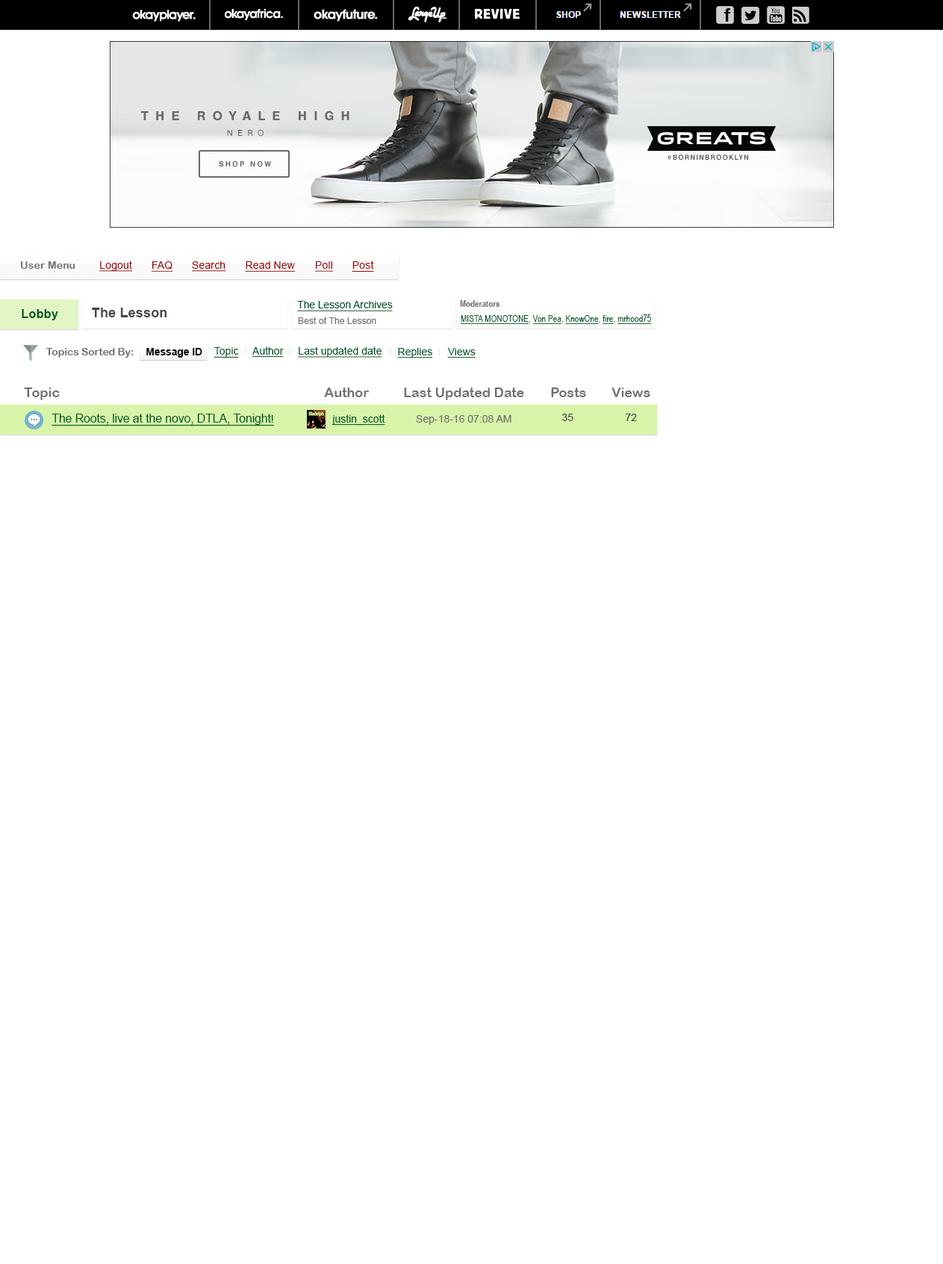
<style>
.page{position:relative;width:943px;height:1264px;background:#ffffff}
.page>*{position:absolute;margin:0}
.t1{font:10.5px "ArialRoundedMTBold";letter-spacing:0.01em;color:#707070}
.t2{font:10.5px "ArialMT";letter-spacing:0.01em;color:#9e0b0f;text-decoration:underline}
.t3{font:10.5px "ArialMT";letter-spacing:-0.01em;color:#005826;text-decoration:underline}
.t4{font:9px "ArialNarrow-Bold";color:#707070}
.t5{font:11.9px "Arial-BoldMT";letter-spacing:0.025em;color:#005826}
.t6{font:13.4px "Arial-BoldMT";letter-spacing:0.01em;color:#464646}
.t7{font:9px "ArialMT";letter-spacing:0.01em;color:#707070}
.t8{font:9px "ArialNarrow";letter-spacing:0.01em;color:#005826;text-decoration:underline}
.t9{font:9px "ArialNarrow";letter-spacing:0.01em;color:#005826}
.t10{font:10.5px "ArialRoundedMTBold";letter-spacing:-0.01em;color:#707070}
.t11{font:10.5px "Arial-BoldMT";letter-spacing:-0.01em;color:#000000}
.t12{font:10.5px "ArialMT";color:#005826;text-decoration:underline}
.t13{font:13.4px "ArialRoundedMTBold";color:#707070}
.t14{font:11.9px "ArialMT";letter-spacing:-0.01em;color:#005826;text-decoration:underline}
.t15{font:10.5px "ArialMT";color:#464646}
.t16{font:10.5px "ArialMT";color:#707070}
</style>
<div class="page">
<p class="t1" style="left:21px;top:261px;width:54px;height:8px">User Menu</p>
<p class="t2" style="left:99px;top:261px;width:34px;height:11px">Logout</p>
<p class="t2" style="left:151px;top:261px;width:22px;height:11px">FAQ</p>
<p class="t2" style="left:192px;top:261px;width:34px;height:11px">Search</p>
<p class="t2" style="left:245px;top:261px;width:51px;height:11px">Read New</p>
<p class="t2" style="left:315px;top:261px;width:18px;height:11px">Poll</p>
<p class="t2" style="left:352px;top:261px;width:22px;height:11px">Post</p>
<p class="t3" style="left:297px;top:301px;width:96px;height:10px">The Lesson Archives</p>
<p class="t4" style="left:460px;top:300px;width:40px;height:7px">Moderators</p>
<p class="t5" style="left:22px;top:309px;width:36px;height:11px">Lobby</p>
<p class="t6" style="left:92px;top:308px;width:75px;height:9px">The Lesson</p>
<p class="t7" style="left:298px;top:317px;width:78px;height:7px">Best of The Lesson</p>
<p class="t8" style="left:461px;top:314px;width:191px;height:10px">MISTA MONOTONE<span class="t9">, </span>Von Pea<span class="t9">, </span>KnowOne<span class="t9">, </span>fire<span class="t9">, </span>mrhood75</p>
<p class="t10" style="left:46px;top:348px;width:88px;height:10px">Topics Sorted By:</p>
<p class="t11" style="left:146px;top:348px;width:56px;height:10px">Message ID</p>
<p class="t12" style="left:214px;top:347px;width:25px;height:11px">Topic</p>
<p class="t12" style="left:252px;top:347px;width:32px;height:11px">Author</p>
<p class="t12" style="left:298px;top:347px;width:84px;height:11px">Last updated date</p>
<p class="t12" style="left:397px;top:348px;width:36px;height:10px">Replies</p>
<p class="t12" style="left:447px;top:348px;width:29px;height:10px">Views</p>
<p class="t13" style="left:24px;top:388px;width:36px;height:12px">Topic</p>
<p class="t13" style="left:324px;top:388px;width:45px;height:9px">Author</p>
<p class="t13" style="left:404px;top:388px;width:120px;height:12px">Last Updated Date</p>
<p class="t13" style="left:551px;top:388px;width:35px;height:9px">Posts</p>
<p class="t13" style="left:612px;top:388px;width:38px;height:9px">Views</p>
<p class="t14" style="left:52px;top:414px;width:222px;height:12px">The Roots, live at the novo, DTLA, Tonight<span class="t3">!</span></p>
<p class="t15" style="left:562px;top:414px;width:12px;height:7px">35</p>
<p class="t15" style="left:626px;top:414px;width:11px;height:7px">72</p>
<p class="t12" style="left:332px;top:414px;width:53px;height:12px">justin_scott</p>
<p class="t16" style="left:416px;top:415px;width:96px;height:10px">Sep-18-16 07:08 AM</p>
</div>
